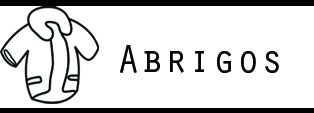
<style>
.page{position:relative;width:314px;height:113px;background:#ffffff}
.page>*{position:absolute;margin:0}
.t1{font:40px "OratorStd";color:#060808}
</style>
<div class="page">
<p class="t1" style="left:120px;top:45px;width:159px;height:28px">Abrigos</p>
</div>
